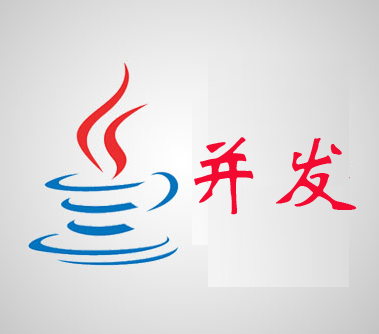
<style>
.page{position:relative;width:379px;height:334px}
.page>*{position:absolute;margin:0}
.t1{font:90px "STXinwei";color:#f20a31}
</style>
<div class="page">
<p class="t1" style="left:194px;top:137px;width:163px;height:78px">并发</p>
</div>
